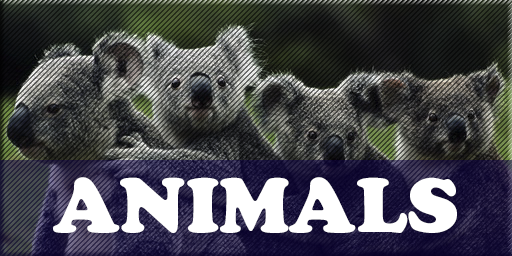
<style>
.page{position:relative;width:512px;height:256px}
.page>*{position:absolute;margin:0}
.t1{font:80px "CooperBlack";color:#ffffff}
</style>
<div class="page">
<p class="t1" style="left:53px;top:177px;width:404px;height:56px">ANIMALS</p>
</div>
